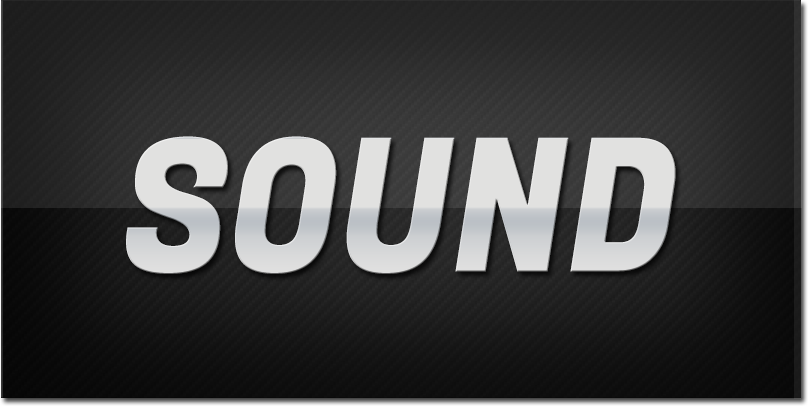
<style>
.page{position:relative;width:808px;height:406px}
.page>*{position:absolute;margin:0}
.t1{font:185.2px "FugazOne-Regular";color:#dfdfdf;scale:0.89 1}
</style>
<div class="page">
<p class="t1" style="left:126px;top:136px;width:550px;height:138px">SOUND</p>
</div>
